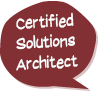
<style>
.page{position:relative;width:98px;height:92px;background:#823033}
.page>*{position:absolute;margin:0}
.t1{font:17px "SuplexmentaryComicNC";color:#ffffff;scale:0.8 1}
</style>
<div class="page">
<p class="t1" style="left:16px;top:12px;width:62px;height:59px;text-align:center;rotate:-3deg">Certified<br> Solutions <br>Architect</p>
</div>
